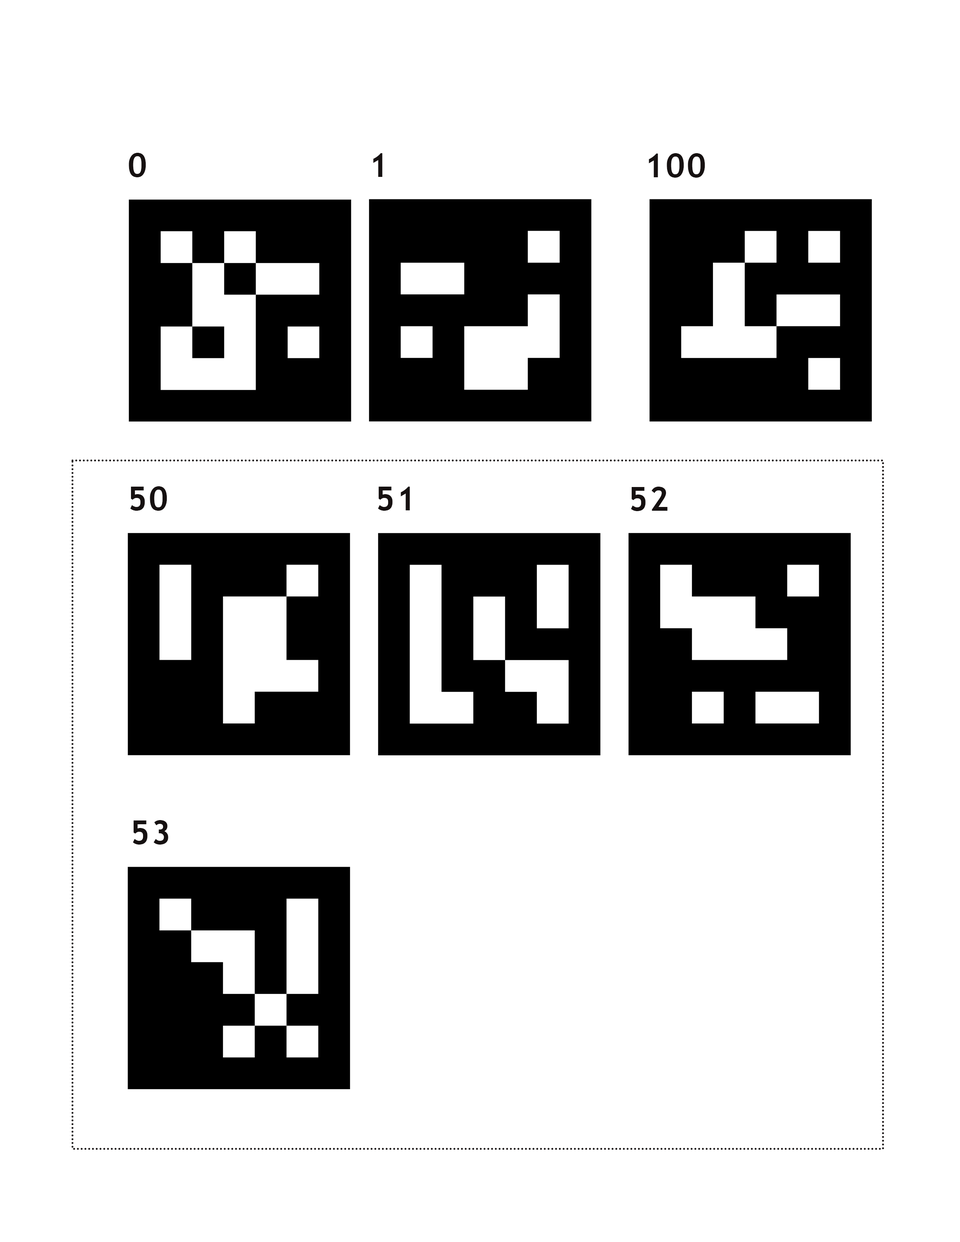
<style>
.page{position:relative;width:960px;height:1242px;background:#ffffff}
.page>*{position:absolute;margin:0}
.t1{font:33.1px "TrebuchetMS-Bold";letter-spacing:0.05em;color:#161111}
</style>
<div class="page">
<p class="t1" style="left:129px;top:153px;width:17px;height:24px">0</p>
<p class="t1" style="left:373px;top:153px;width:9px;height:24px">1</p>
<p class="t1" style="left:649px;top:153px;width:56px;height:25px">100</p>
<p class="t1" style="left:130px;top:486px;width:37px;height:25px">50</p>
<p class="t1" style="left:378px;top:487px;width:32px;height:24px">51</p>
<p class="t1" style="left:631px;top:487px;width:36px;height:24px">52</p>
<p class="t1" style="left:133px;top:820px;width:35px;height:25px">53</p>
</div>
